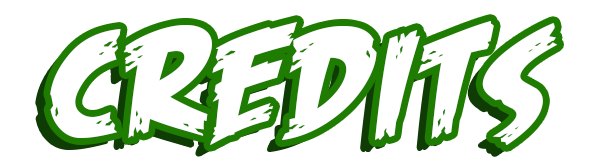
<style>
.page{position:relative;width:600px;height:160px;background:#ffffff}
.page>*{position:absolute;margin:0}
.t1{font:157px "FeastofFleshBBItalic";letter-spacing:0.08em;color:#ffffff}
</style>
<div class="page">
<p class="t1" style="left:50px;top:21px;width:508px;height:124px">credits</p>
</div>
